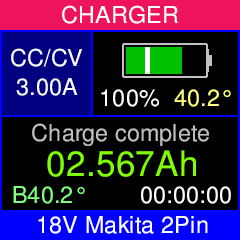
<style>
.page{position:relative;width:240px;height:240px;background:#000000}
.page>*{position:absolute;margin:0}
.t1{font:23.3px "FreeSans";letter-spacing:0.01em;color:#ffffff}
.t2{font:23.3px "FreeSans";letter-spacing:0.01em;color:#ffff80}
.t3{font:23.3px "FreeSans";letter-spacing:0.01em;color:#c0c0c0}
.t4{font:35px "FreeSans";letter-spacing:0.01em;color:#80ff00}
.t5{font:23.3px "FreeSans";letter-spacing:0.01em;color:#80ff80}
</style>
<div class="page">
<p class="t1" style="left:62px;top:5px;width:116px;height:19px">CHARGER</p>
<p class="t1" style="left:11px;top:48px;width:71px;height:19px">CC/CV</p>
<p class="t1" style="left:16px;top:78px;width:62px;height:18px">3.00A</p>
<p class="t1" style="left:101px;top:89px;width:58px;height:18px">100%</p>
<p class="t2" style="left:174px;top:89px;width:57px;height:18px">40.2°</p>
<p class="t3" style="left:32px;top:123px;width:177px;height:23px">Charge complete</p>
<p class="t4" style="left:47px;top:150px;width:149px;height:27px">02.567Ah</p>
<p class="t5" style="left:13px;top:186px;width:72px;height:18px">B40.2°</p>
<p class="t1" style="left:141px;top:186px;width:90px;height:18px">00:00:00</p>
<p class="t1" style="left:38px;top:216px;width:170px;height:18px">18V Makita 2Pin</p>
</div>
